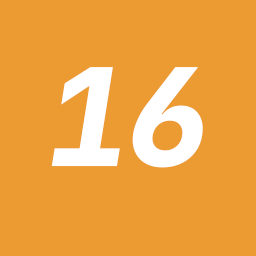
<style>
.page{position:relative;width:256px;height:256px;background:#ec9b32}
.page>*{position:absolute;margin:0}
.t1{font:135.4px "JetBrainsMono-ExtraBoldItalic";color:#ffffff}
</style>
<div class="page">
<p class="t1" style="left:51px;top:67px;width:152px;height:101px">16</p>
</div>
